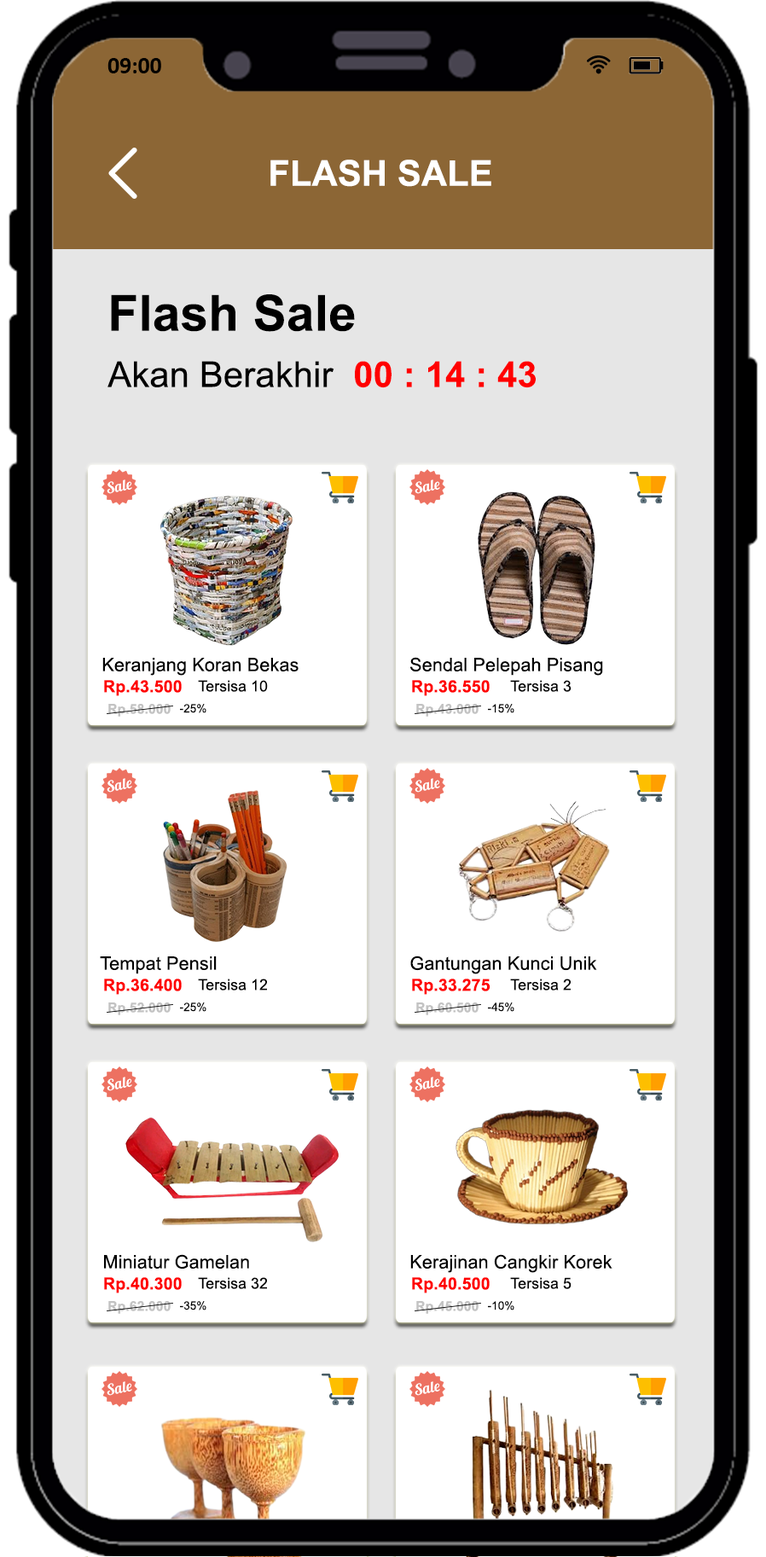
<style>
.page{position:relative;width:766px;height:1557px;background:#ffffff}
.page>*{position:absolute;margin:0}
.t1{font:23.6px "Calibri-Bold";color:#000000}
.t2{font:35.5px "Arial-BoldMT";letter-spacing:0.005em;color:#ffffff}
.t3{font:49.8px "Arial-BoldMT";letter-spacing:0.005em;color:#000000}
.t4{font:35.5px "ArialMT";letter-spacing:0.005em;color:#000000}
.t5{font:35.5px "Arial-BoldMT";letter-spacing:0.005em;color:#ff0000}
.t6{font:18.5px "ArialMT";letter-spacing:0.005em;color:#000000}
.t7{font:16.8px "Arial-BoldMT";letter-spacing:0.005em;color:#ff0000}
.t8{font:15.1px "ArialMT";letter-spacing:0.005em;color:#000000}
.t9{font:13.5px "Arial-BoldMT";letter-spacing:0.005em;color:#c3c3c3}
.t10{font:11.5px "ArialMT";letter-spacing:0.005em;color:#000000}
</style>
<div class="page">
<p class="t1" style="left:107px;top:58px;width:54px;height:15px">09:00</p>
<p class="t2" style="left:270px;top:160px;width:221px;height:27px">FLASH SALE</p>
<p class="t3" style="left:111px;top:294px;width:244px;height:38px">Flash Sale</p>
<p class="t4" style="left:107px;top:361px;width:429px;height:27px">Akan Berakhir  <span class="t5">00 : 14 : 43</span></p>
<p class="t6" style="left:102px;top:658px;width:197px;height:18px">Keranjang Koran Bekas</p>
<p class="t6" style="left:410px;top:657px;width:193px;height:19px">Sendal Pelepah Pisang</p>
<p class="t7" style="left:104px;top:680px;width:78px;height:16px">Rp.43.500</p>
<p class="t8" style="left:198px;top:680px;width:70px;height:12px">Tersisa 10</p>
<p class="t7" style="left:412px;top:680px;width:78px;height:16px">Rp.36.550</p>
<p class="t8" style="left:510px;top:680px;width:62px;height:12px">Tersisa 3</p>
<p class="t9" style="left:108px;top:704px;width:63px;height:13px">Rp.58.000</p>
<p class="t10" style="left:180px;top:704px;width:26px;height:9px">-25%</p>
<p class="t9" style="left:416px;top:704px;width:63px;height:13px">Rp.43.000</p>
<p class="t10" style="left:488px;top:704px;width:26px;height:9px">-15%</p>
<p class="t6" style="left:100px;top:956px;width:117px;height:18px">Tempat Pensil</p>
<p class="t6" style="left:410px;top:955px;width:187px;height:19px">Gantungan Kunci Unik</p>
<p class="t7" style="left:104px;top:978px;width:78px;height:17px">Rp.36.400</p>
<p class="t8" style="left:198px;top:978px;width:69px;height:12px">Tersisa 12</p>
<p class="t7" style="left:412px;top:978px;width:78px;height:17px">Rp.33.275</p>
<p class="t8" style="left:510px;top:978px;width:61px;height:12px">Tersisa 2</p>
<p class="t9" style="left:108px;top:1002px;width:63px;height:13px">Rp.52.000</p>
<p class="t10" style="left:180px;top:1002px;width:26px;height:10px">-25%</p>
<p class="t9" style="left:416px;top:1002px;width:63px;height:13px">Rp.60.500</p>
<p class="t10" style="left:488px;top:1002px;width:26px;height:10px">-45%</p>
<p class="t6" style="left:104px;top:1254px;width:145px;height:15px">Miniatur Gamelan</p>
<p class="t6" style="left:410px;top:1254px;width:202px;height:19px">Kerajinan Cangkir Korek</p>
<p class="t7" style="left:104px;top:1277px;width:78px;height:16px">Rp.40.300</p>
<p class="t8" style="left:198px;top:1277px;width:69px;height:12px">Tersisa 32</p>
<p class="t7" style="left:412px;top:1277px;width:78px;height:16px">Rp.40.500</p>
<p class="t8" style="left:510px;top:1277px;width:62px;height:12px">Tersisa 5</p>
<p class="t9" style="left:108px;top:1301px;width:63px;height:13px">Rp.62.000</p>
<p class="t10" style="left:180px;top:1301px;width:26px;height:9px">-35%</p>
<p class="t9" style="left:416px;top:1301px;width:63px;height:13px">Rp.45.000</p>
<p class="t10" style="left:488px;top:1301px;width:26px;height:9px">-10%</p>
</div>
